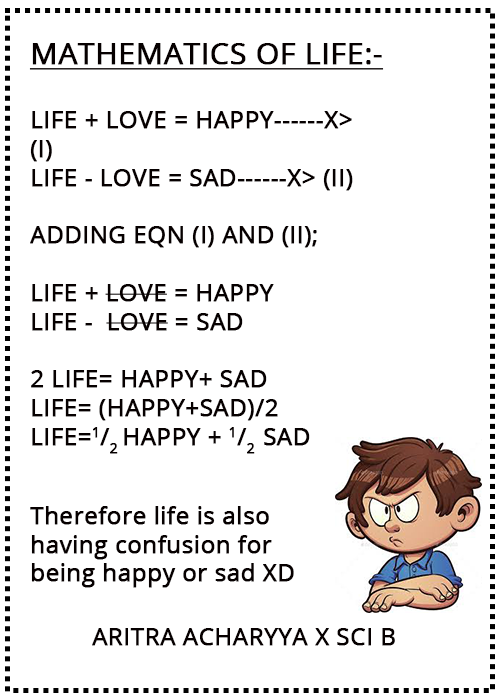
<style>
.page{position:relative;width:500px;height:700px;background:#ffffff}
.page>*{position:absolute;margin:0}
.t1{font:30px "OpenSans-Regular";color:#060000;font-weight:bold;text-decoration:underline}
.t2{font:24px "OpenSans-Regular";color:#060000;font-weight:bold}
</style>
<div class="page">
<p class="t1" style="left:29px;top:43px;width:355px;height:27px">MATHEMATICS OF LIFE:-</p>
<p class="t2" style="left:30px;top:111px;width:323px;height:343px">LIFE + LOVE = HAPPY------X&gt; (I)<br>LIFE - LOVE = SAD------X&gt; (II)<br><br>ADDING EQN (I) AND (II);<br><br>LIFE + LOVE = HAPPY<br>LIFE -  LOVE = SAD<br><br>2 LIFE= HAPPY+ SAD<br>LIFE= (HAPPY+SAD)/2<br>LIFE=1/2 HAPPY + 1/2  SAD</p>
<p class="t2" style="left:30px;top:506px;width:264px;height:82px">Therefore life is also having confusion for being happy or sad XD</p>
<p class="t2" style="left:92px;top:628px;width:303px;height:18px">ARITRA ACHARYYA X SCI B</p>
</div>
